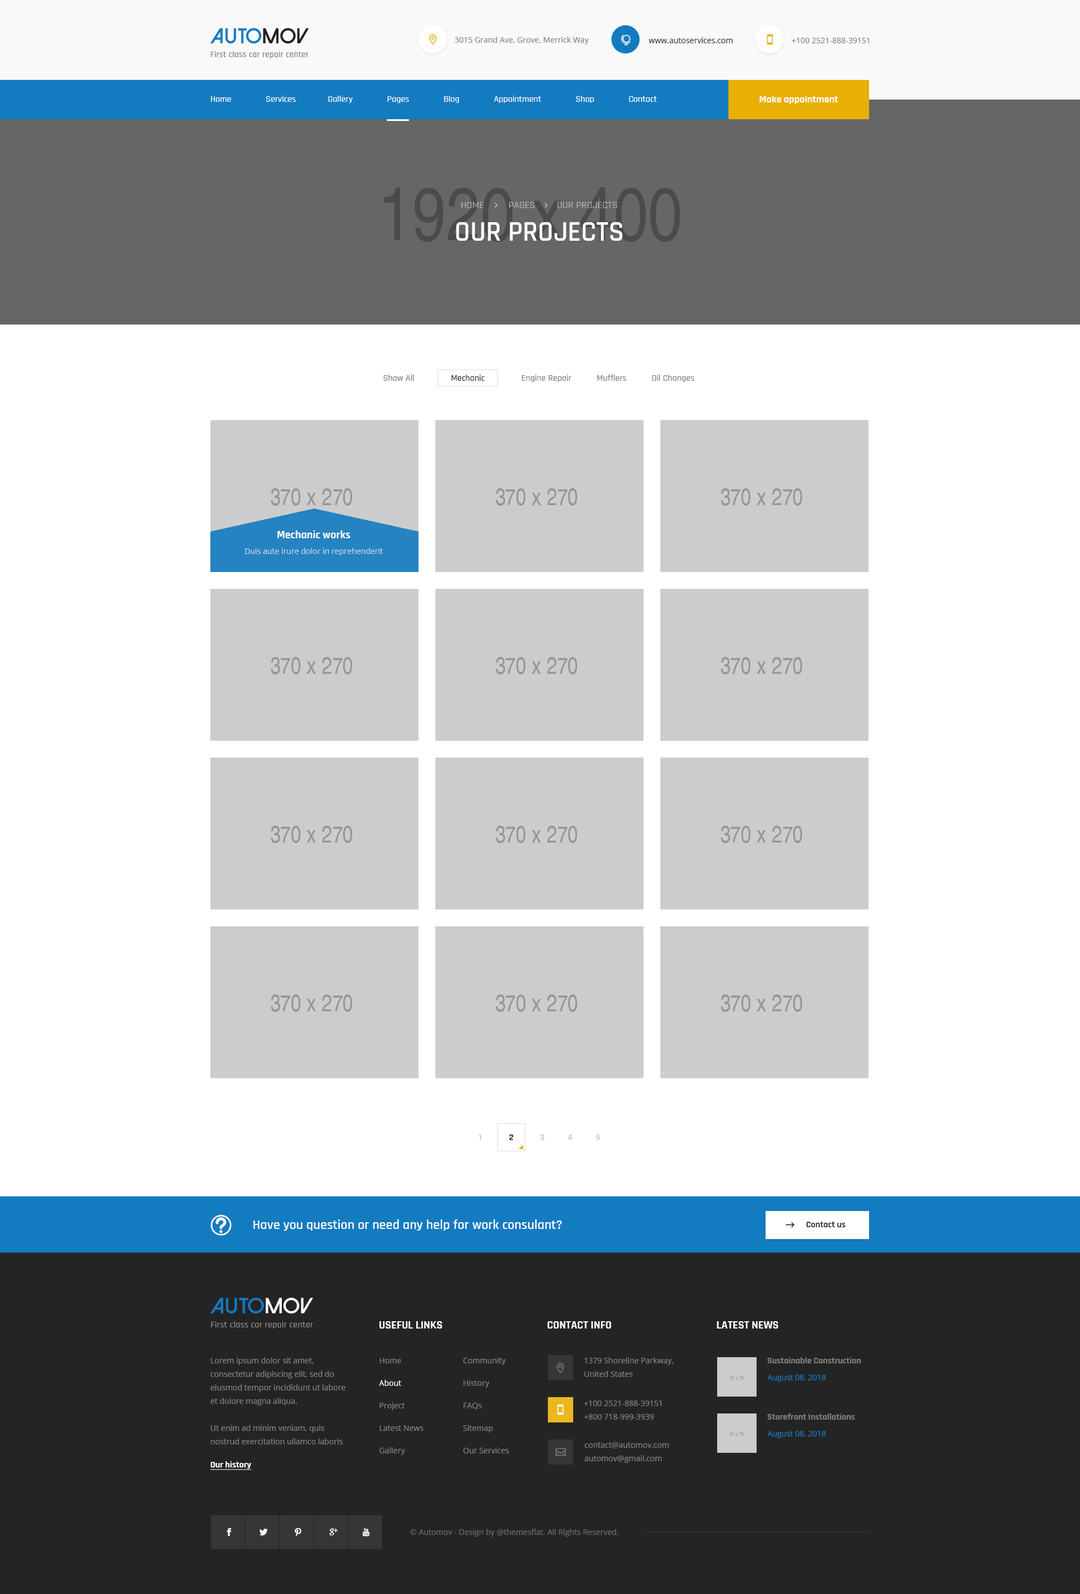
<style>
.page{position:relative;width:1080px;height:1594px;background:#ffffff}
.page>*{position:absolute;margin:0}
.t1{font:7.9px "OpenSans";color:#838383}
.t2{font:7.9px "OpenSans";color:#363636}
.t3{font:9px "Rajdhani-Medium";color:#ffffff}
.t4{font:10.1px "Rajdhani-Bold";color:#ffffff}
.t5{font:10.1px "Rajdhani-Regular";color:#bcbcbc}
.t6{font:28.1px "Rajdhani-SemiBold";color:#ffffff;text-transform:uppercase}
.t7{font:9px "Rajdhani-Medium";color:#7d7d7d}
.t8{font:9px "Rajdhani-Medium";color:#7c7c7c}
.t9{font:9px "Rajdhani-Medium";color:#302d2d}
.t10{font:11.2px "Rajdhani-Bold";color:#ffffff}
.t11{font:7.9px "OpenSans";color:#bdd3e7}
.t12{font:9px "Rajdhani-Bold";color:#cecdcd}
.t13{font:9px "Rajdhani-Bold";color:#221f1f}
.t14{font:13.5px "Rajdhani-SemiBold";color:#ffffff}
.t15{font:9px "Rajdhani-Bold";color:#363636}
.t16{font:11.2px "Rajdhani-Bold";color:#ffffff;text-transform:uppercase}
.t17{font:7.9px/13.5px "OpenSans";color:#808080}
.t18{font:7.9px/22.5px "OpenSans";color:#808080}
.t19{font:7.9px/22.5px "OpenSans";color:#ffffff}
.t20{font:9px "Rajdhani-Bold";color:#808080}
.t21{font:7.9px "OpenSans";color:#137bc0}
.t22{font:9px "Rajdhani-Bold";color:#ffffff;text-decoration:underline}
.t23{font:7.9px "OpenSans";color:#6a6a6a}
</style>
<div class="page">
<p class="t1" style="left:454px;top:37px;width:135px;height:7px">3015 Grand Ave, Grove, Merrick Way</p>
<p class="t2" style="left:649px;top:37px;width:84px;height:6px">www.autoservices.com</p>
<p class="t1" style="left:791px;top:38px;width:78px;height:5px">+100 2521-888-39151</p>
<p class="t3" style="left:211px;top:96px;width:446px;height:7px">Home               Services              Gallery               Pages               Blog               Appointment               Shop               Contact</p>
<p class="t4" style="left:759px;top:96px;width:79px;height:8px">Make appointment</p>
<p class="t5" style="left:461px;top:202px;width:156px;height:6px">HOME         PAGES        OUR PROJECTS</p>
<p class="t6" style="left:456px;top:222px;width:167px;height:19px">OUR projects</p>
<p class="t7" style="left:384px;top:375px;width:310px;height:7px"><span class="t8">Show All          </span><span class="t9">      Mechanic                </span>Engine Repair           Mufflers           Oil Changes</p>
<p class="t10" style="left:277px;top:530px;width:73px;height:8px">Mechanic works</p>
<p class="t11" style="left:245px;top:548px;width:138px;height:8px">Duis aute irure dolor in reprehenderit</p>
<p class="t12" style="left:479px;top:1135px;width:3px;height:5px">1</p>
<p class="t13" style="left:509px;top:1135px;width:5px;height:5px">2</p>
<p class="t12" style="left:540px;top:1135px;width:4px;height:5px">3</p>
<p class="t12" style="left:568px;top:1135px;width:5px;height:5px">4</p>
<p class="t12" style="left:596px;top:1135px;width:4px;height:5px">5</p>
<p class="t14" style="left:253px;top:1220px;width:309px;height:11px">Have you question or need any help for work consulant?</p>
<p class="t15" style="left:806px;top:1222px;width:39px;height:5px">Contact us</p>
<p class="t16" style="left:379px;top:1321px;width:63px;height:8px">Useful Links</p>
<p class="t10" style="left:547px;top:1321px;width:64px;height:8px">CONTACT INFO</p>
<p class="t16" style="left:717px;top:1321px;width:61px;height:8px">Latest news</p>
<p class="t17" style="left:210px;top:1357px;width:135px;height:87px">Lorem ipsum dolor sit amet, consectetur adipiscing elit, sed do eiusmod tempor incididunt ut labore et dolore magna aliqua. <br><br>Ut enim ad minim veniam, quis nostrud exercitation ullamco laboris nisi</p>
<p class="t18" style="left:379px;top:1358px;width:45px;height:97px">Home<br><span class="t19">About<br></span>Project<br>Latest News<br>Gallery</p>
<p class="t18" style="left:463px;top:1357px;width:46px;height:97px">Community<br>History<br>FAQs<br>Sitemap<br>Our Services</p>
<p class="t17" style="left:584px;top:1357px;width:89px;height:20px">1379 Shoreline Parkway, <br>United States</p>
<p class="t20" style="left:767px;top:1357px;width:94px;height:7px">Sustainable Construction</p>
<p class="t21" style="left:767px;top:1375px;width:59px;height:7px">August 08, 2018</p>
<p class="t17" style="left:584px;top:1401px;width:78px;height:19px">+100 2521-888-39151<br>+800 718-999-3939</p>
<p class="t20" style="left:767px;top:1414px;width:88px;height:6px">Storefront Installations</p>
<p class="t21" style="left:767px;top:1431px;width:59px;height:7px">August 08, 2018</p>
<p class="t17" style="left:584px;top:1442px;width:85px;height:21px">contact@automov.com<br>automov@gmail.com</p>
<p class="t22" style="left:210px;top:1461px;width:41px;height:9px">Our history</p>
<p class="t23" style="left:410px;top:1529px;width:208px;height:8px">© Automov - Design by @themesflat. All Rights Reserved.</p>
</div>
